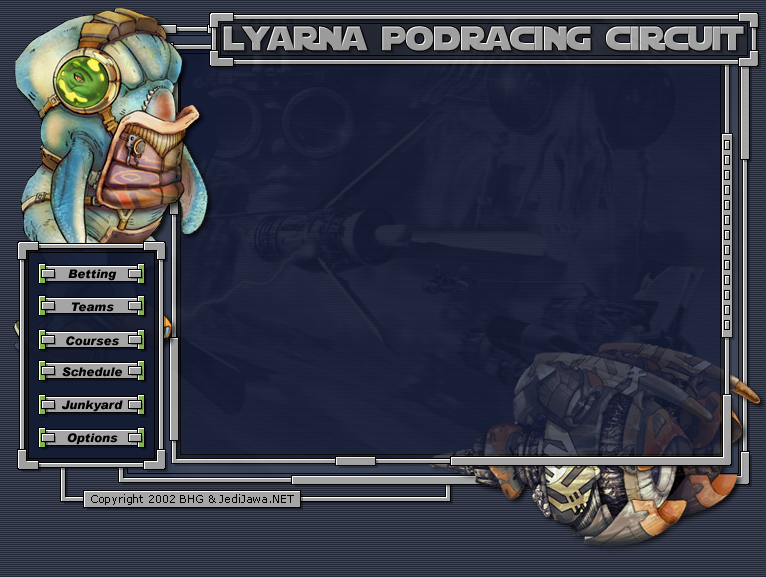
<style>
.page{position:relative;width:766px;height:577px}
.page>*{position:absolute;margin:0}
.t1{font:33.3px "StarJediSpecialEdition";color:#a6a5a5}
.t2{font:12px "Arial-BlackItalic";color:#000000}
.t3{font:11px "Verdana";color:#000000}
</style>
<div class="page">
<p class="t1" style="left:223px;top:26px;width:521px;height:25px">lyarna podracing circuit</p>
<p class="t2" style="left:68px;top:269px;width:49px;height:12px">Betting</p>
<p class="t2" style="left:71px;top:302px;width:43px;height:10px">Teams</p>
<p class="t2" style="left:66px;top:336px;width:53px;height:10px">Courses</p>
<p class="t2" style="left:62px;top:367px;width:60px;height:10px">Schedule</p>
<p class="t2" style="left:62px;top:400px;width:61px;height:12px">Junkyard</p>
<p class="t2" style="left:67px;top:433px;width:51px;height:12px">Options</p>
<p class="t3" style="left:91px;top:494px;width:203px;height:11px">Copyright 2002 BHG &amp; JediJawa.NET</p>
</div>
